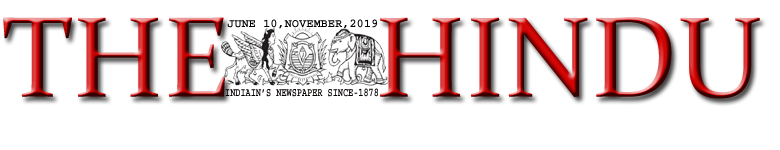
<style>
.page{position:relative;width:780px;height:150px;background:#ffffff}
.page>*{position:absolute;margin:0}
.t1{font:115px "Constantia"}
.t2{font:12px "Courier-Bold";color:#040000}
.t3{font:12px "Courier-Bold";color:#040000;scale:0.71 1}
</style>
<div class="page">
<p class="t1" style="left:3px;top:17px;width:757px;height:82px">THE     HINDU</p>
<p class="t2" style="left:227px;top:19px;width:150px;height:10px">JUNE 10,NOVEMBER,2019</p>
<p class="t3" style="left:225px;top:88px;width:153px;height:9px">INDIAIN’S NEWSPAPER SINCE-1878</p>
</div>
